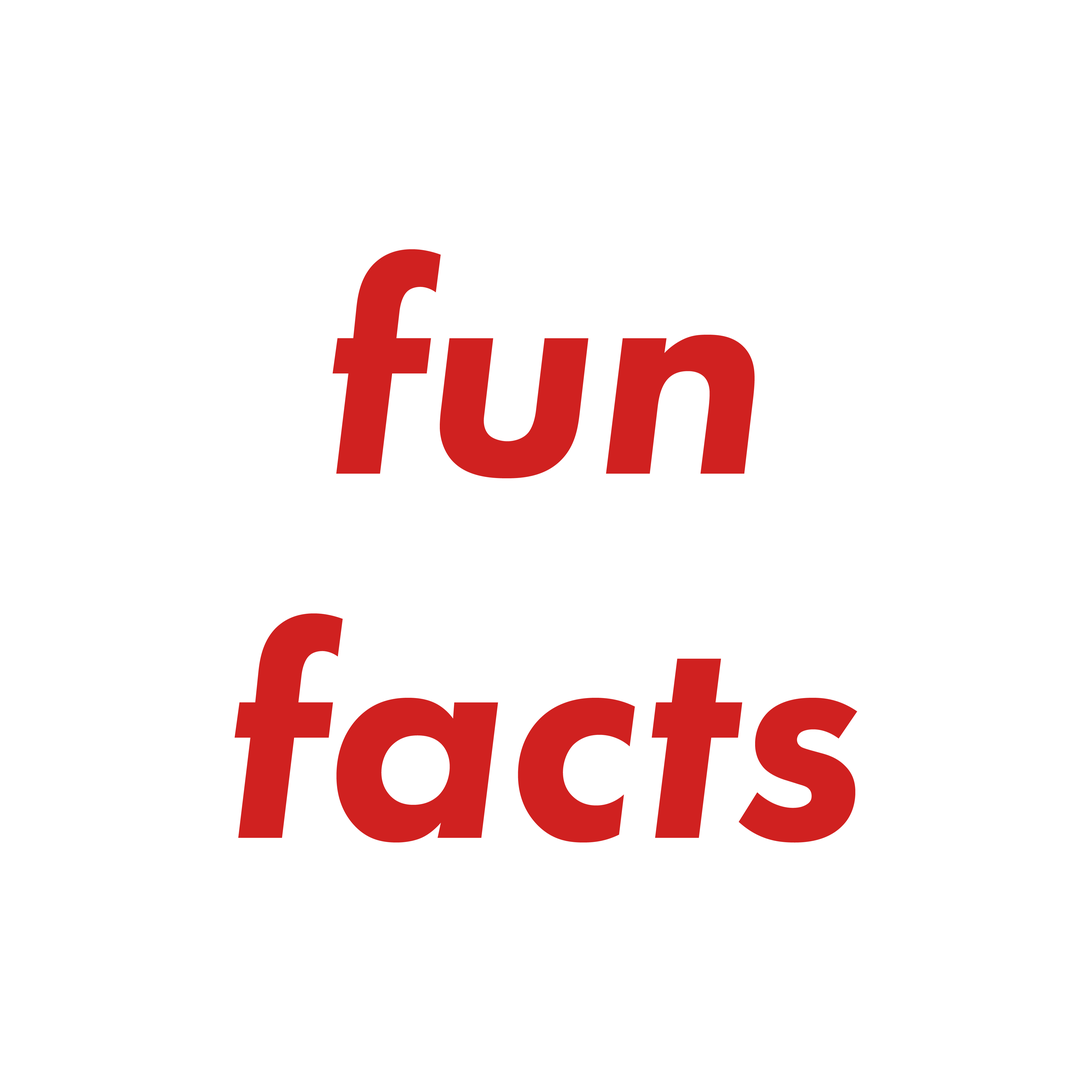
<style>
.page{position:relative;width:1092px;height:1092px;background:#ffffff}
.page>*{position:absolute;margin:0}
.t1{font:303.3px "FuturaPT-HeavyObl";color:#d02120}
</style>
<div class="page">
<p class="t1" style="left:235px;top:249px;width:622px;height:594px;text-align:center">fun<br>facts</p>
</div>
